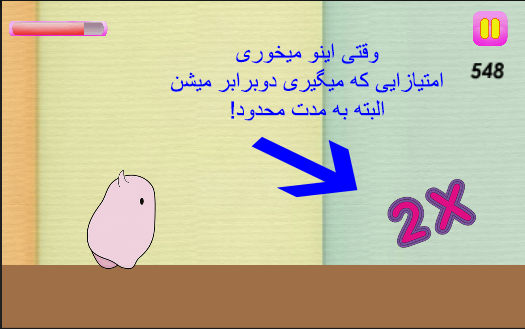
<style>
.page{position:relative;width:525px;height:329px}
.page>*{position:absolute;margin:0}
.t1{font:24px "ArialMT";color:#0000ff}
</style>
<div class="page">
<p class="t1" style="left:171px;top:43px;width:272px;height:78px;text-align:center">وقتی اینو میخوری<br>امتیازایی که میگیری دوبرابر میشن<br>البته به مدت محدود!</p>
</div>
